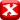
<style>
.page{position:relative;width:20px;height:20px}
.page>*{position:absolute;margin:0}
.t1{font:18px "Ravie";color:#ffffff}
</style>
<div class="page">
<p class="t1" style="left:2px;top:3px;width:16px;height:13px">x</p>
</div>
